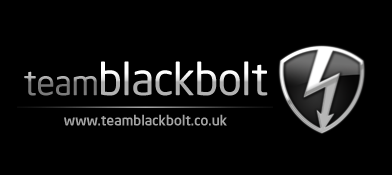
<style>
.page{position:relative;width:392px;height:175px;background:#000000}
.page>*{position:absolute;margin:0}
.t1{font:44.9px "NeoSansIntel";color:#ffffff}
.t2{font:34.6px "NeoSansIntel";color:#a7a6a6}
.t3{font:14px "NeoSansIntel-Medium";color:#a3a3a3}
</style>
<div class="page">
<p class="t1" style="left:24px;top:61px;width:244px;height:35px"><span class="t2">team</span>blackbolt</p>
<p class="t3" style="left:64px;top:114px;width:163px;height:12px">www.teamblackbolt.co.uk</p>
</div>
